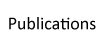
<style>
.page{position:relative;width:105px;height:50px;background:#ffffff}
.page>*{position:absolute;margin:0}
.t1{font:18px "Calibri";color:#020202}
</style>
<div class="page">
<p class="t1" style="left:9px;top:17px;width:87px;height:13px">Publications</p>
</div>
